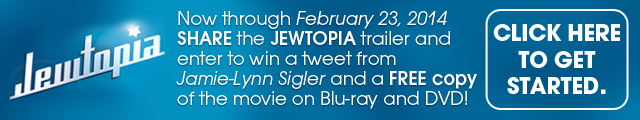
<style>
.page{position:relative;width:640px;height:120px}
.page>*{position:absolute;margin:0}
.t1{font:20px/19.9px "AvantGarGotItcTOT-Boo";color:#ffffff}
.t2{font:20px/19.9px "AvantGarGotItcTOT-BooObl";color:#ffffff}
.t3{font:20px/19.9px "AvantGarGotItcTOT-Dem";color:#ffffff}
.t4{font:24.3px/26.6px "AvantGarGotItcTOT-Bol";color:#ffffff;text-transform:uppercase}
.t5{font:29.1px/26.6px "AvantGarGotItcTOT-Bol";color:#ffffff;text-transform:uppercase}
</style>
<div class="page">
<p class="t1" style="left:176px;top:11px;width:301px;height:98px">Now through <span class="t2">February 23, 2014 </span><span class="t3">SHARE </span>the <span class="t3">JEWTOPIA </span>trailer and enter to win a tweet from <span class="t2">Jamie-Lynn Sigler </span>and a <span class="t3">FREE copy </span>of the movie on Blu-ray and DVD!</p>
<p class="t4" style="left:493px;top:24px;width:127px;height:70px;text-align:center">Click here to get started<span class="t5">.</span></p>
</div>
